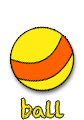
<style>
.page{position:relative;width:84px;height:120px;background:#ffffff}
.page>*{position:absolute;margin:0}
.t1{font:20.4px "Chalkduster";color:#ffec14}
</style>
<div class="page">
<p class="t1" style="left:21px;top:98px;width:43px;height:21px">ball</p>
</div>
